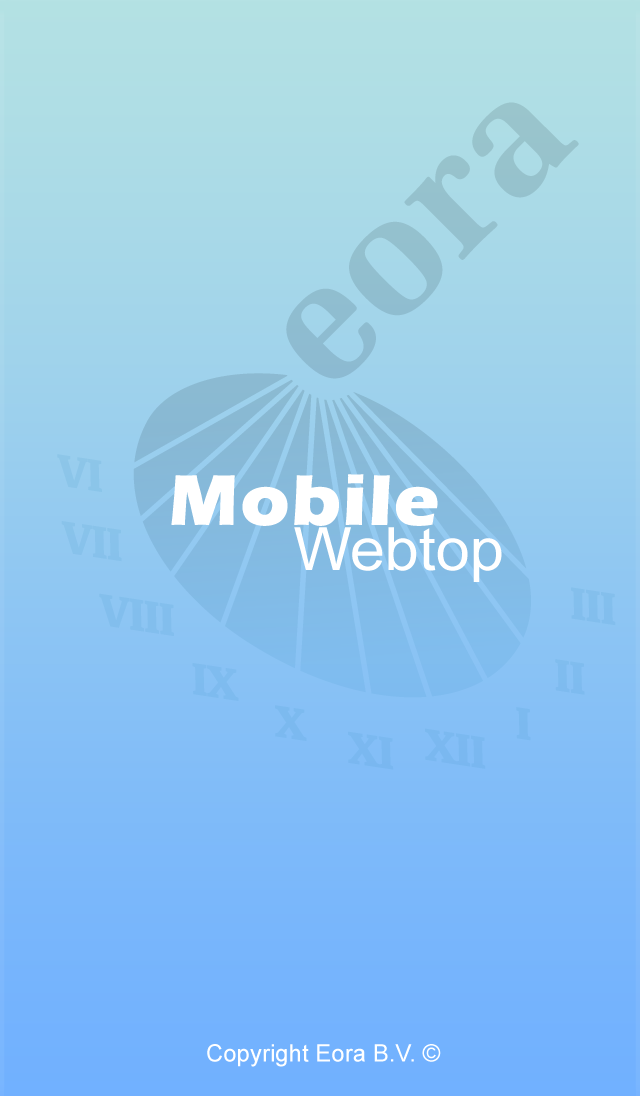
<style>
.page{position:relative;width:640px;height:1096px}
.page>*{position:absolute;margin:0}
.t1{font:73.4px "ErasITC-Bold";color:#ffffff;font-weight:bold}
.t2{font:59.7px "ArialMT";color:#ffffff}
.t3{font:24px "ArialMT";color:#ffffff}
</style>
<div class="page">
<p class="t1" style="left:171px;top:474px;width:267px;height:52px">Mobile</p>
<p class="t2" style="left:294px;top:527px;width:208px;height:55px">Webtop</p>
<p class="t3" style="left:207px;top:1044px;width:234px;height:23px">Copyright Eora B.V. ©</p>
</div>
